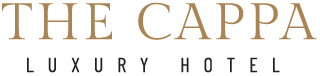
<style>
.page{position:relative;width:320px;height:76px;background:#ffffff}
.page>*{position:absolute;margin:0}
.t1{font:51px "GildaDisplay-Regular";letter-spacing:0.08em;color:#aa8453}
.t2{font:20.2px "BarlowCondensed-Regular";letter-spacing:0.685em;color:#222222}
</style>
<div class="page">
<p class="t1" style="left:2px;top:2px;width:315px;height:38px">THE CAPPA</p>
<p class="t2" style="left:27px;top:57px;width:253px;height:16px">LUXURY HOTEL</p>
</div>
